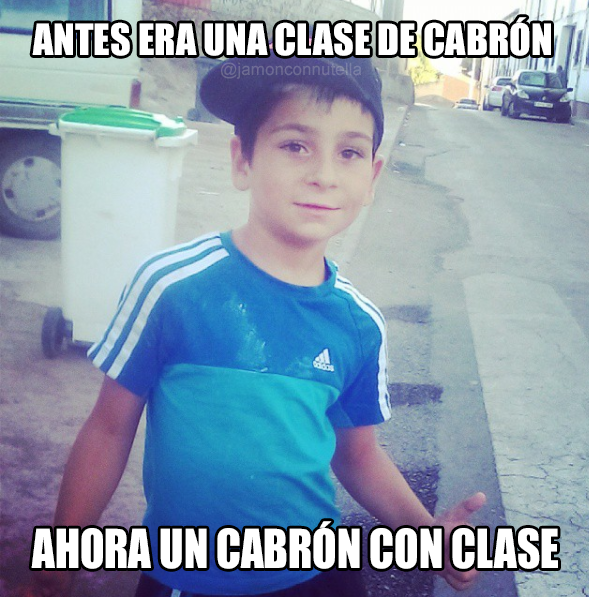
<style>
.page{position:relative;width:589px;height:597px}
.page>*{position:absolute;margin:0}
.t1{font:40px "Impact";color:#ffffff}
.t2{font:17.1px "ArialMT";color:#716f98}
.t3{font:49.4px "Impact";color:#ffffff;scale:0.91 1}
</style>
<div class="page">
<p class="t1" style="left:32px;top:17px;width:519px;height:39px">ANTES ERA UNA CLASE DE CABRÓN</p>
<p class="t2" style="left:221px;top:62px;width:141px;height:17px">@jamonconnutella</p>
<p class="t3" style="left:31px;top:521px;width:527px;height:48px">AHORA UN CABRÓN CON CLASE</p>
</div>
